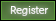
<style>
.page{position:relative;width:56px;height:21px}
.page>*{position:absolute;margin:0}
.t1{font:10px "BadComic";color:#ffffff}
</style>
<div class="page">
<p class="t1" style="left:10px;top:6px;width:39px;height:10px">Register</p>
</div>
